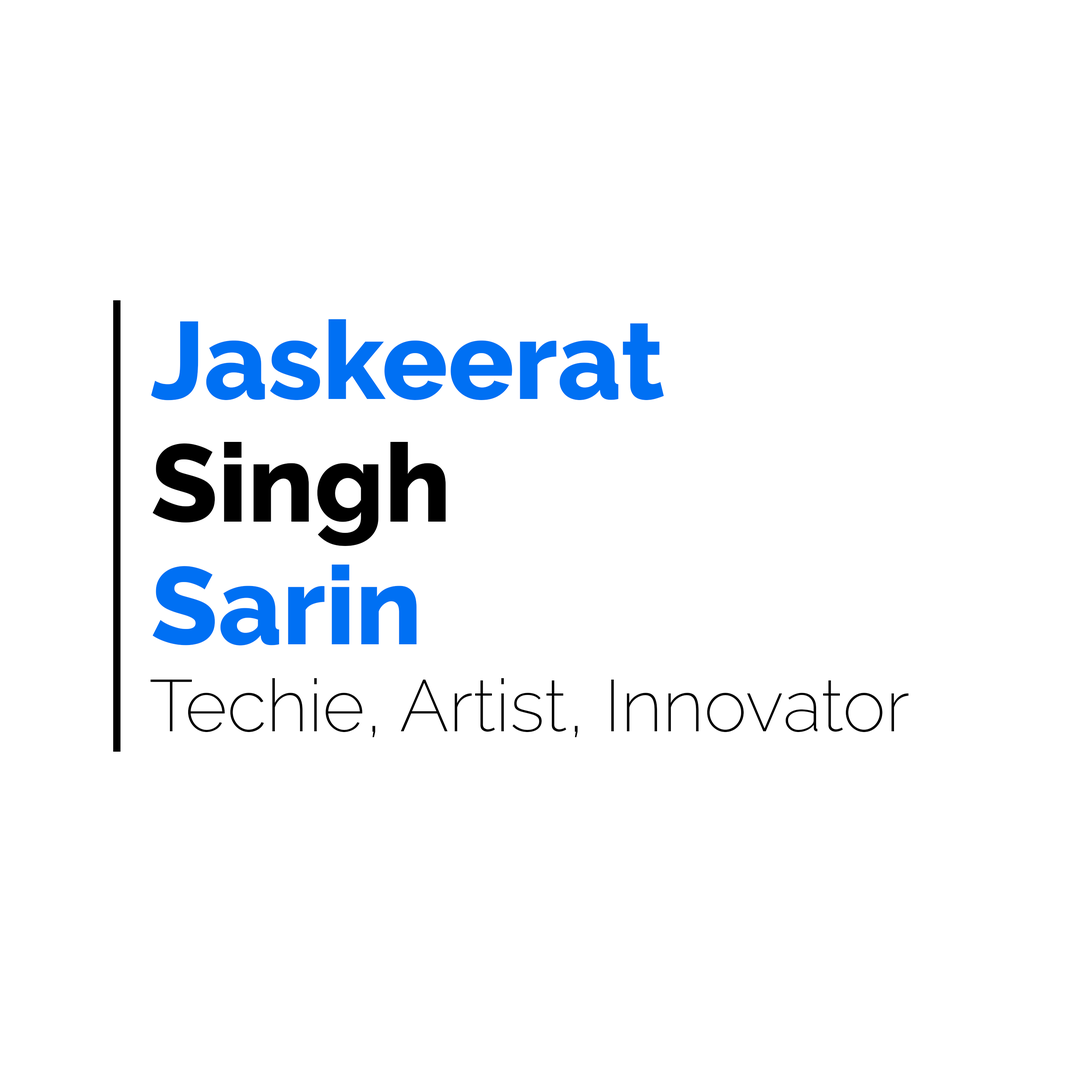
<style>
.page{position:relative;width:1092px;height:1092px;background:#ffffff}
.page>*{position:absolute;margin:0}
.t1{font:109.2px/122.6px "Raleway-ExtraBold";letter-spacing:0.001em;color:#0070f3}
.t2{font:109.2px/122.6px "Raleway-ExtraBold";letter-spacing:0.001em;color:#000000}
.t3{font:72.8px "Raleway-ExtraLight";letter-spacing:0.001em;color:#000000}
</style>
<div class="page">
<p class="t1" style="left:151px;top:319px;width:513px;height:326px">Jaskeerat<br><span class="t2">Singh<br></span>Sarin</p>
<p class="t3" style="left:150px;top:678px;width:759px;height:59px">Techie, Artist, Innovator</p>
</div>
